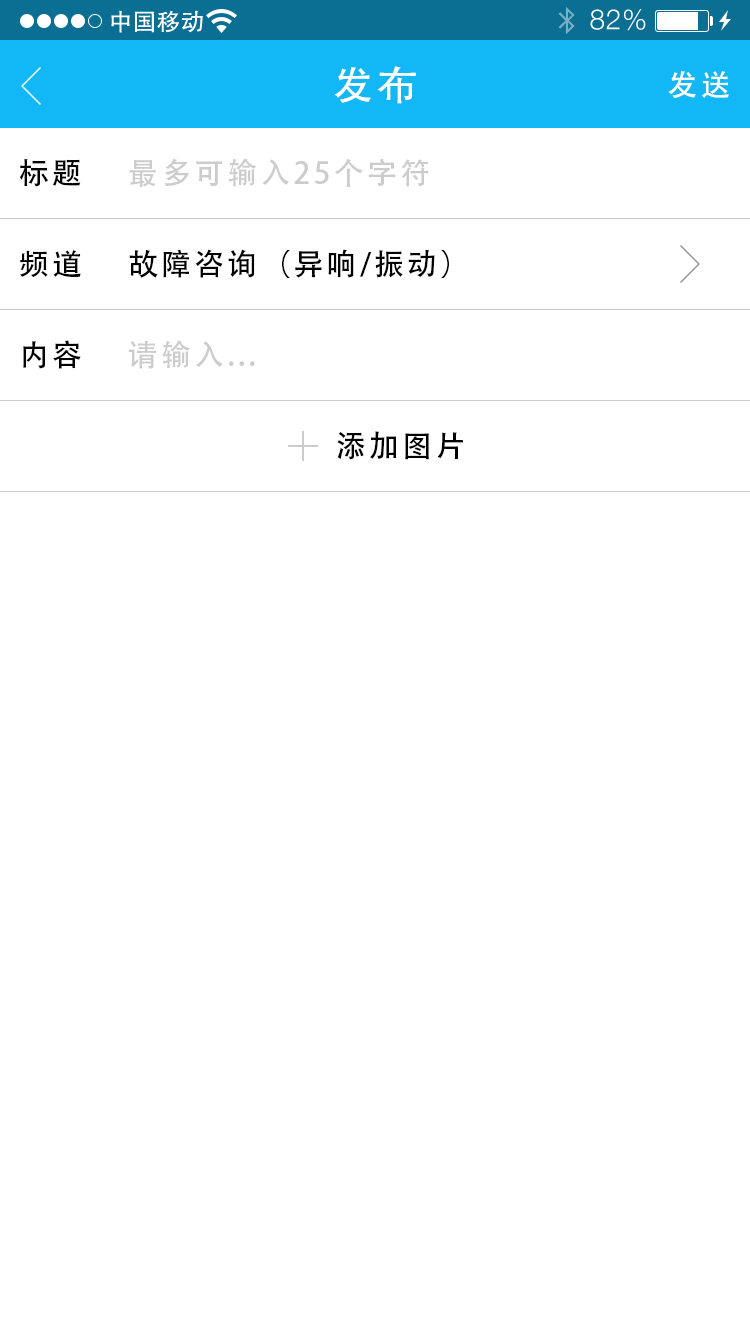
<style>
.page{position:relative;width:750px;height:1334px;background:#ffffff}
.page>*{position:absolute;margin:0}
.t1{font:40px "AdobeHeitiStd-Regular";letter-spacing:0.104em;color:#ffffff}
.t2{font:30px "AdobeHeitiStd-Regular";letter-spacing:0.104em;color:#ffffff}
.t3{font:30px "AdobeHeitiStd-Regular";letter-spacing:0.104em;color:#000000}
.t4{font:30px "AdobeHeitiStd-Regular";letter-spacing:0.104em;color:#cccccc}
</style>
<div class="page">
<p class="t1" style="left:334px;top:66px;width:82px;height:38px">发布</p>
<p class="t2" style="left:668px;top:71px;width:61px;height:27px">发送</p>
<p class="t3" style="left:19px;top:159px;width:62px;height:28px">标题</p>
<p class="t4" style="left:129px;top:158px;width:300px;height:30px">最多可输入25个字符</p>
<p class="t3" style="left:20px;top:250px;width:61px;height:28px">频道</p>
<p class="t3" style="left:129px;top:249px;width:320px;height:29px">故障咨询（异响/振动）</p>
<p class="t3" style="left:23px;top:340px;width:58px;height:29px">内容</p>
<p class="t4" style="left:128px;top:340px;width:127px;height:29px">请输入...</p>
<p class="t3" style="left:337px;top:431px;width:126px;height:29px">添加图片</p>
</div>
